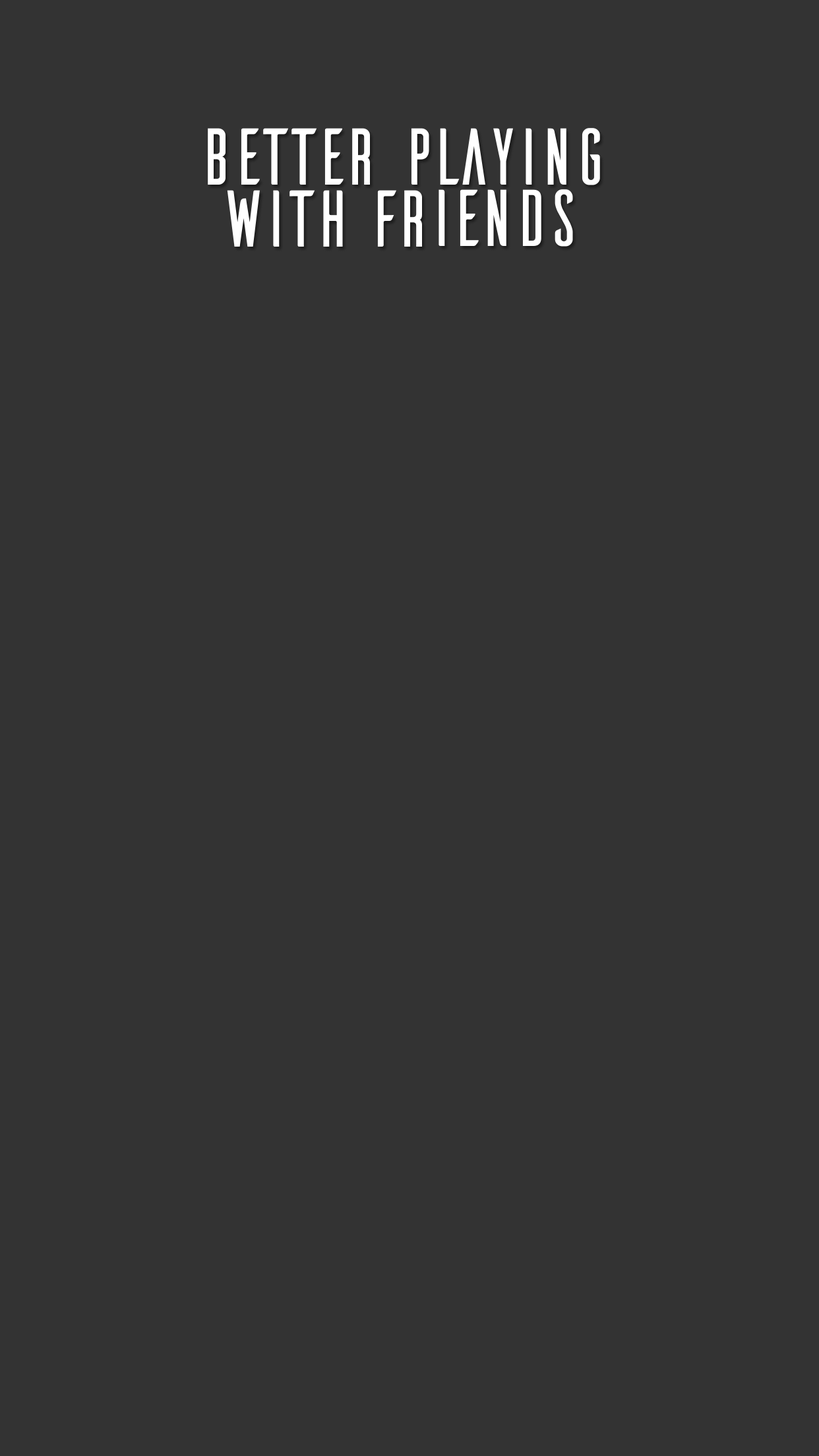
<style>
.page{position:relative;width:819px;height:1456px;background:#333333}
.page>*{position:absolute;margin:0}
.t1{font:82.1px/61.5px "Ailerons";color:#ffffff}
</style>
<div class="page">
<p class="t1" style="left:208px;top:128px;width:392px;height:119px;text-align:center">better playing<br>with friends</p>
</div>
